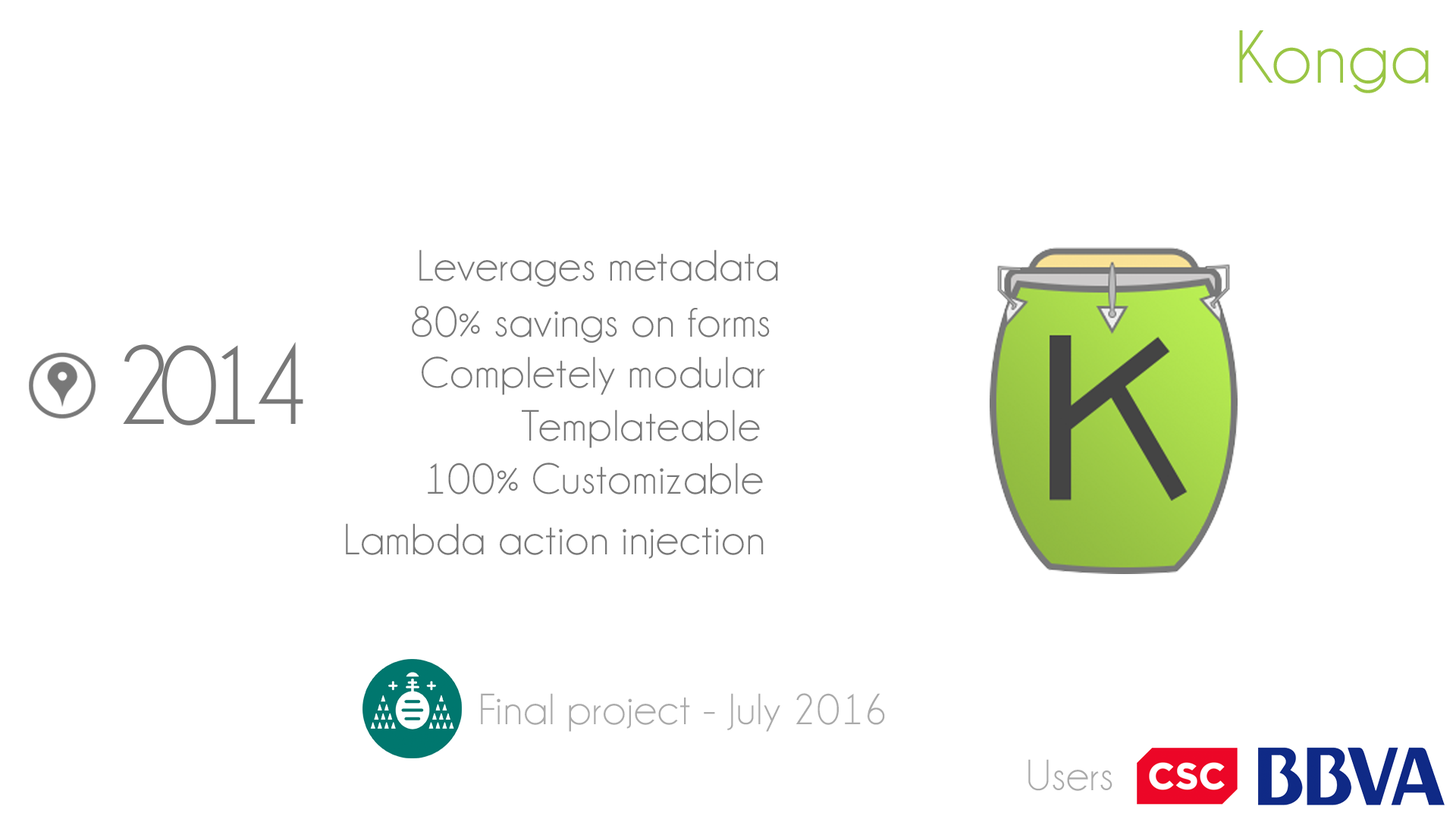
<style>
.page{position:relative;width:1456px;height:819px;background:#ffffff}
.page>*{position:absolute;margin:0}
.t1{font:75.8px "Champagne&Limousines";letter-spacing:0.02em;color:#99c544}
.t2{font:44.2px "Champagne&Limousines";letter-spacing:0.02em;color:#787878}
.t3{font:113.7px "Champagne&Limousines";letter-spacing:-0.12em;color:#787878}
.t4{font:44.2px "Champagne&Limousines";letter-spacing:0.02em;color:#aaaaaa}
</style>
<div class="page">
<p class="t1" style="left:1239px;top:30px;width:190px;height:63px">Konga</p>
<p class="t2" style="left:419px;top:249px;width:359px;height:38px">Leverages metadata</p>
<p class="t2" style="left:412px;top:306px;width:358px;height:37px">80% savings on forms</p>
<p class="t3" style="left:123px;top:342px;width:180px;height:83px">2014</p>
<p class="t2" style="left:422px;top:356px;width:343px;height:39px">Completely modular</p>
<p class="t2" style="left:522px;top:409px;width:238px;height:39px">Templateable</p>
<p class="t2" style="left:428px;top:463px;width:335px;height:31px">100% Customizable</p>
<p class="t2" style="left:346px;top:523px;width:418px;height:36px">Lambda action injection</p>
<p class="t4" style="left:481px;top:693px;width:404px;height:39px">Final project - July 2016</p>
<p class="t4" style="left:1028px;top:759px;width:84px;height:32px">Users</p>
</div>
